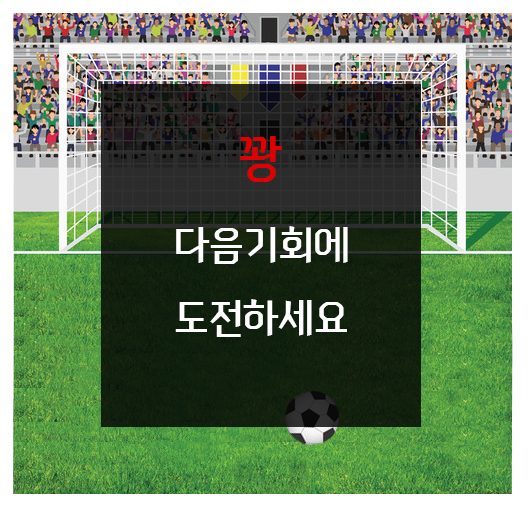
<style>
.page{position:relative;width:528px;height:510px}
.page>*{position:absolute;margin:0}
.t1{font:12px "NEXONFootballGothicL";color:#e10000}
.t2{font:41.7px "NEXONFootballGothicL";color:#ffffff}
</style>
<div class="page">
<p class="t1" style="left:240px;top:136px;width:42px;height:46px">꽝</p>
<p class="t2" style="left:175px;top:226px;width:173px;height:111px">다음기회에<br>도전하세요</p>
</div>
